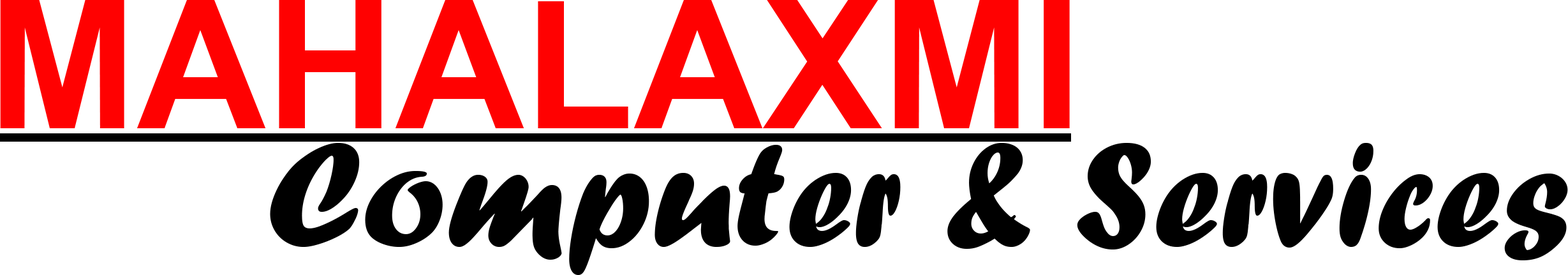
<style>
.page{position:relative;width:1568px;height:275px;background:#ffffff}
.page>*{position:absolute;margin:0}
.t1{font:178.8px "Arial-BoldMT";color:#ff0101}
.t2{font:154.4px "ForteMT";color:#000000}
</style>
<div class="page">
<p class="t1" style="left:0px;top:0px;width:1070px;height:128px">MAHALAXMI</p>
<p class="t2" style="left:270px;top:143px;width:1298px;height:132px">Computer &amp; Services</p>
</div>
